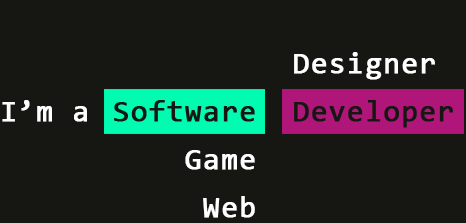
<style>
.page{position:relative;width:466px;height:223px;background:#161713}
.page>*{position:absolute;margin:0}
.t1{font:30px/48px "Consolas";letter-spacing:0.025em;font-weight:bold}
.t2{font:30px "Consolas";letter-spacing:0.025em;color:#ffffff;font-weight:bold}
</style>
<div class="page">
<p class="t1" style="left:294px;top:52px;width:159px;height:76px">Designer<br>Developer</p>
<p class="t2" style="left:2px;top:100px;width:85px;height:22px">I’m a</p>
<p class="t1" style="left:114px;top:100px;width:141px;height:118px;text-align:right">Software<br>Game<br>Web</p>
</div>
